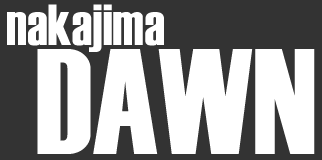
<style>
.page{position:relative;width:322px;height:160px;background:#333333}
.page>*{position:absolute;margin:0}
.t1{font:58px "Haettenschweiler";color:#ffffff}
.t2{font:150px "Haettenschweiler";color:#ffffff}
</style>
<div class="page">
<p class="t1" style="left:7px;top:4px;width:157px;height:48px">nakajima</p>
<p class="t2" style="left:37px;top:49px;width:278px;height:105px">DAWN</p>
</div>
